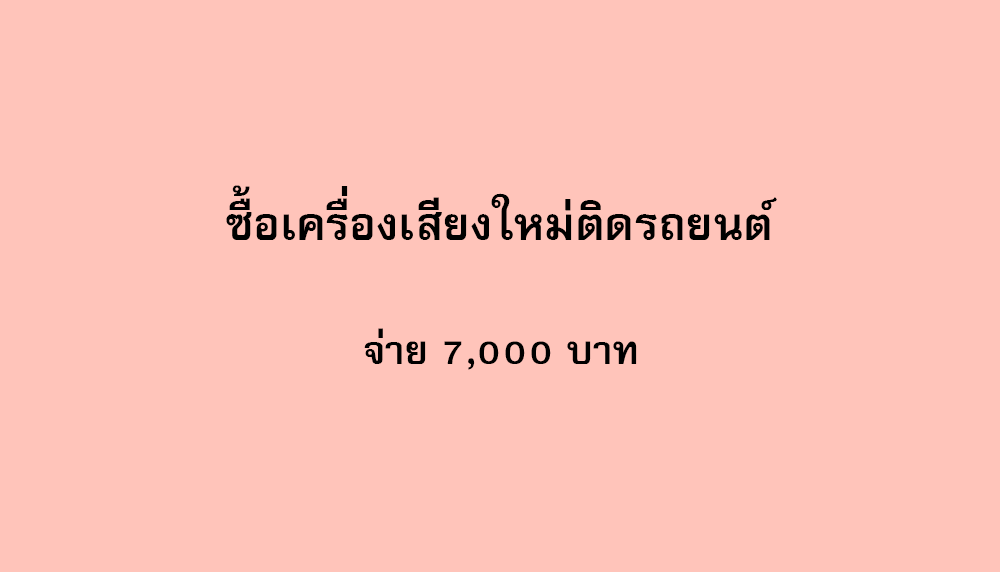
<style>
.page{position:relative;width:1000px;height:572px;background:#ffc4ba}
.page>*{position:absolute;margin:0}
.t1{font:64px "FreesiaUPCBold";color:#000000}
.t2{font:56px "FreesiaUPCBold";color:#000000}
</style>
<div class="page">
<p class="t1" style="left:226px;top:185px;width:551px;height:55px">ซื้อเครื่องเสียงใหม่ติดรถยนต์</p>
<p class="t2" style="left:364px;top:328px;width:273px;height:42px">จ่าย 7,000 บาท</p>
</div>
